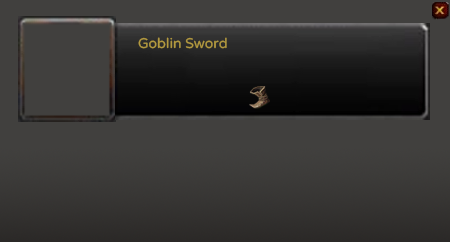
<style>
.page{position:relative;width:450px;height:242px;background:#41403e}
.page>*{position:absolute;margin:0}
.t1{font:14px "VarelaRound-Regular";color:#b2993f}
</style>
<div class="page">
<p class="t1" style="left:138px;top:37px;width:89px;height:12px">Goblin Sword</p>
</div>
